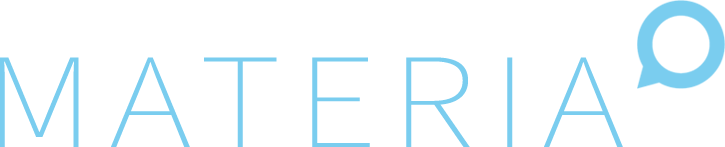
<style>
.page{position:relative;width:725px;height:147px;background:#ffffff}
.page>*{position:absolute;margin:0}
.t1{font:135.5px "SourceSansPro-ExtraLight";letter-spacing:0.1em;color:#7acdef;scale:1.16 1}
</style>
<div class="page">
<p class="t1" style="left:0px;top:57px;width:623px;height:90px">MATERIA</p>
</div>
